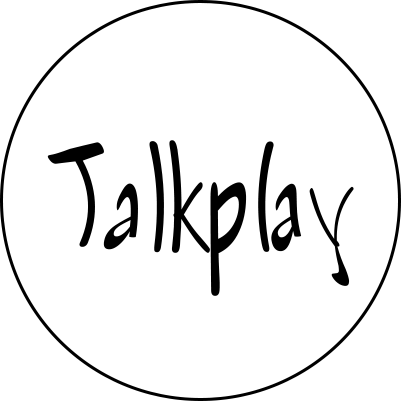
<style>
.page{position:relative;width:401px;height:401px;background:#ffffff}
.page>*{position:absolute;margin:0}
.t1{font:136.3px "StylusBT";color:#ffffff;scale:0.83 1}
</style>
<div class="page">
<p class="t1" style="left:47px;top:140px;width:307px;height:156px">Talkplay</p>
</div>
